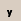
<style>
.page{position:relative;width:21px;height:21px;background:#d9cdc1}
.page>*{position:absolute;margin:0}
.t1{font:9px "Tahoma-Bold";color:#000000}
</style>
<div class="page">
<p class="t1" style="left:7px;top:10px;width:6px;height:7px">y</p>
</div>
